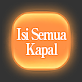
<style>
.page{position:relative;width:82px;height:82px}
.page>*{position:absolute;margin:0}
.t1{font:16px/15px "RyuminPro-ExBold";letter-spacing:-0.08em;color:#ffffff;scale:0.8 1}
</style>
<div class="page">
<p class="t1" style="left:16px;top:27px;width:51px;height:31px;text-align:center">Isi Semua<br>Kapal</p>
</div>
